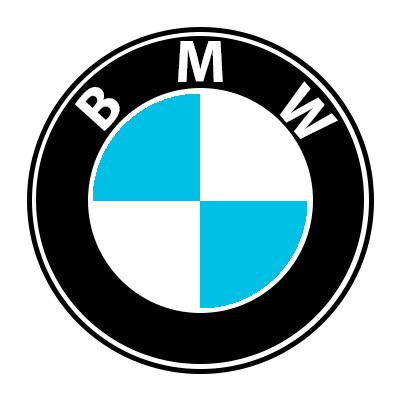
<style>
.page{position:relative;width:400px;height:400px;background:#ffffff}
.page>*{position:absolute;margin:0}
.t1{font:60px "MyriadPro-Bold";color:#fefefe}
</style>
<div class="page">
<p class="t1" style="left:178px;top:41px;width:45px;height:41px">M</p>
<p class="t1" style="left:75px;top:87px;width:45px;height:44px;rotate:-48deg">B</p>
<p class="t1" style="left:279px;top:81px;width:59px;height:58px;rotate:49deg">W</p>
</div>
